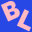
<style>
.page{position:relative;width:32px;height:32px;background:#2748e5}
.page>*{position:absolute;margin:0}
.t1{font:24px "TMTLimkin-ExtraBoldSans";letter-spacing:0.04em;color:#ffbac2}
</style>
<div class="page">
<p class="t1" style="left:1px;top:1px;width:19px;height:21px;rotate:-24deg">B</p>
<p class="t1" style="left:17px;top:9px;width:14px;height:23px;rotate:25deg">L</p>
</div>
